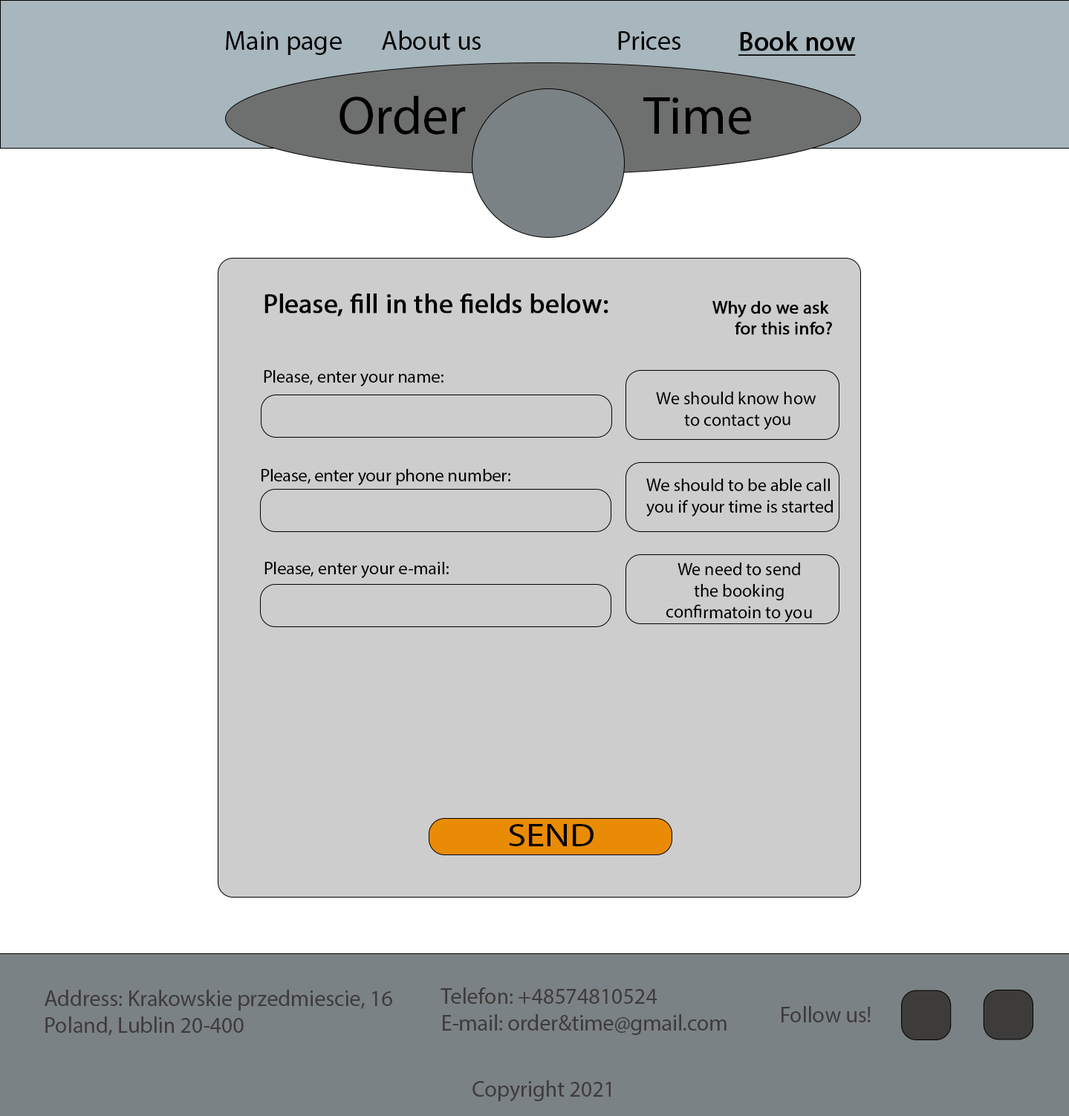
<style>
.page{position:relative;width:1069px;height:1116px;background:#ffffff}
.page>*{position:absolute;margin:0}
.t1{font:26.7px "MyriadPro-Regular";color:#000000}
.t2{font:26.7px "MyriadPro-Regular";color:#000000;font-weight:bold;text-decoration:underline}
.t3{font:53.5px "MyriadPro-Regular";color:#000000}
.t4{font:26.7px "MyriadPro-Regular";color:#030303;font-weight:bold}
.t5{font:17.8px "MyriadPro-Regular";color:#030303;font-weight:bold}
.t6{font:17.8px "MyriadPro-Regular";color:#030303}
.t7{font:32.1px "MyriadPro-Regular";color:#000000;scale:1.18 1}
.t8{font:22.3px "MyriadPro-Regular";color:#3e3b3b}
</style>
<div class="page">
<p class="t1" style="left:226px;top:31px;width:116px;height:24px">Main page</p>
<p class="t1" style="left:382px;top:30px;width:99px;height:20px">About us</p>
<p class="t1" style="left:618px;top:31px;width:62px;height:19px">Prices</p>
<p class="t2" style="left:738px;top:31px;width:118px;height:25px">Book now</p>
<p class="t3" style="left:339px;top:96px;width:127px;height:38px">Order</p>
<p class="t3" style="left:643px;top:97px;width:108px;height:37px">Time</p>
<p class="t4" style="left:264px;top:293px;width:344px;height:23px">Please, fill in the fields below:</p>
<p class="t5" style="left:712px;top:301px;width:120px;height:34px;text-align:right">Why do we ask <br>for this info?</p>
<p class="t6" style="left:264px;top:370px;width:179px;height:16px">Please, enter your name:</p>
<p class="t6" style="left:656px;top:391px;width:160px;height:39px;text-align:justify">We should know how<br> to contact you</p>
<p class="t6" style="left:261px;top:469px;width:250px;height:16px">Please, enter your phone number:</p>
<p class="t6" style="left:646px;top:478px;width:187px;height:38px;text-align:justify">We should to be able call<br>you if your time is started</p>
<p class="t6" style="left:264px;top:562px;width:185px;height:16px">Please, enter your e-mail:</p>
<p class="t6" style="left:666px;top:562px;width:146px;height:60px;text-align:justify">We need to send <br>the booking <br>confirmatoin to you</p>
<p class="t7" style="left:509px;top:824px;width:84px;height:22px">SEND</p>
<p class="t8" style="left:45px;top:989px;width:347px;height:46px;text-align:justify">Address: Krakowskie przedmiescie, 16<br>Poland, Lublin 20-400</p>
<p class="t8" style="left:440px;top:987px;width:286px;height:48px;text-align:justify">Telefon: +48574810524<br>E-mail: order&amp;time@gmail.com</p>
<p class="t8" style="left:781px;top:1006px;width:90px;height:16px">Follow us!</p>
<p class="t8" style="left:472px;top:1080px;width:139px;height:22px">Copyright 2021</p>
</div>
